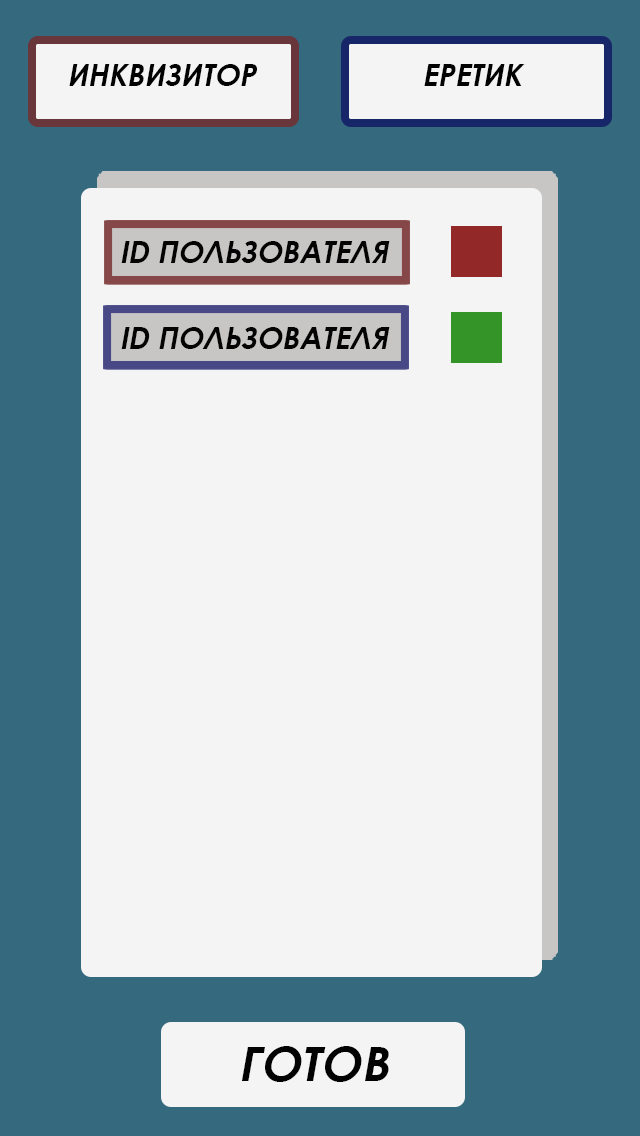
<style>
.page{position:relative;width:640px;height:1136px;background:#f4f4f4}
.page>*{position:absolute;margin:0}
.t1{font:30px "CenturyGothic-Bold";color:#020202;font-style:italic}
.t2{font:30px "CenturyGothic-Bold";color:#030303;font-style:italic}
.t3{font:48px "CenturyGothic-Bold";color:#020202;font-style:italic}
</style>
<div class="page">
<p class="t1" style="left:69px;top:64px;width:188px;height:22px">ИНКВИЗИТОР</p>
<p class="t1" style="left:424px;top:64px;width:101px;height:22px">ЕРЕТИК</p>
<p class="t2" style="left:121px;top:241px;width:269px;height:22px">ID ПОЛЬЗОВАТЕЛЯ</p>
<p class="t2" style="left:121px;top:327px;width:269px;height:22px">ID ПОЛЬЗОВАТЕЛЯ</p>
<p class="t3" style="left:242px;top:1046px;width:147px;height:36px">ГОТОВ</p>
</div>
